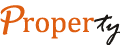
<style>
.page{position:relative;width:120px;height:45px;background:#ffffff}
.page>*{position:absolute;margin:0}
.t1{font:36px "LucidaHandwriting-Italic";color:#de5d10}
.t2{font:30px "CambriaMath";color:#de5d10}
.t3{font:31px "RageItalic";letter-spacing:0.005em;color:#1a1714}
</style>
<div class="page">
<p class="t1" style="left:0px;top:5px;width:25px;height:30px">P</p>
<p class="t2" style="left:23px;top:17px;width:71px;height:22px">roper</p>
<p class="t3" style="left:94px;top:14px;width:28px;height:32px">ty</p>
</div>
